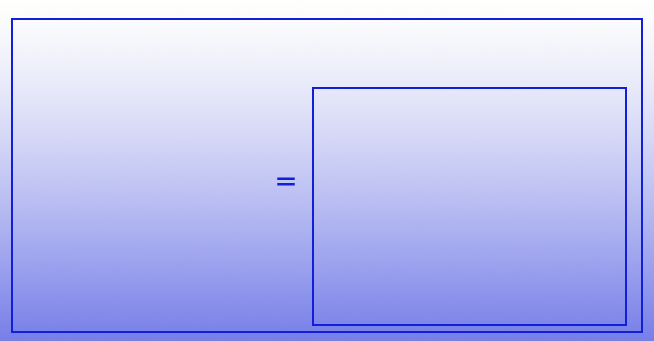
<style>
.page{position:relative;width:654px;height:341px}
.page>*{position:absolute;margin:0}
.t1{font:33.2px "BookAntiqua";letter-spacing:0.005em;color:#111fd8;scale:1.05 1}
</style>
<div class="page">
<p class="t1" style="left:277px;top:177px;width:18px;height:9px">=</p>
</div>
